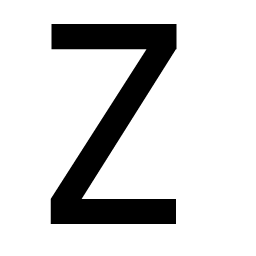
<style>
.page{position:relative;width:256px;height:256px;background:#ffffff}
.page>*{position:absolute;margin:0}
.t1{font:200px "RAF_PW_ATH";color:#000000}
</style>
<div class="page">
<p class="t1" style="left:50px;top:24px;width:127px;height:200px">z</p>
</div>
